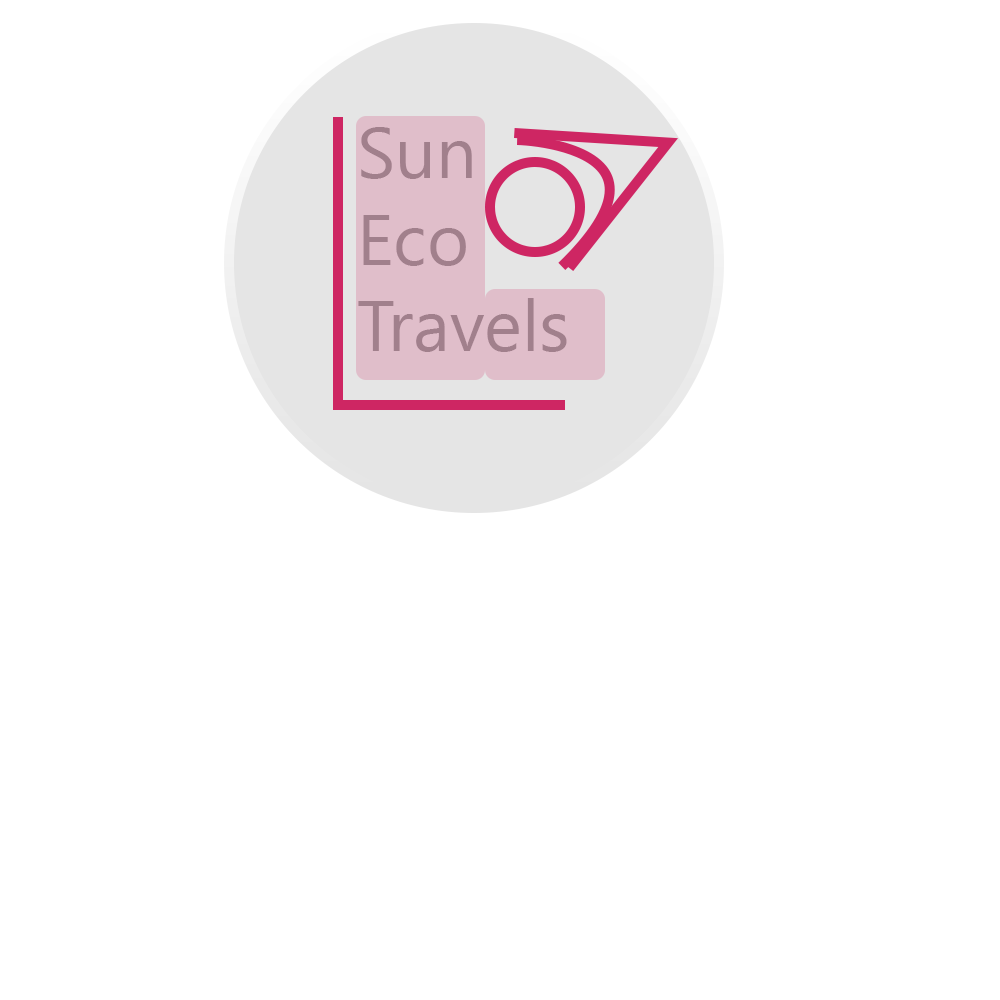
<style>
.page{position:relative;width:1000px;height:1000px;background:#ffffff}
.page>*{position:absolute;margin:0}
.t1{font:72px "LeelawadeeUI";color:#969696}
</style>
<div class="page">
<p class="t1" style="left:358px;top:127px;width:209px;height:225px">Sun<br>Eco<br>Travels</p>
</div>
